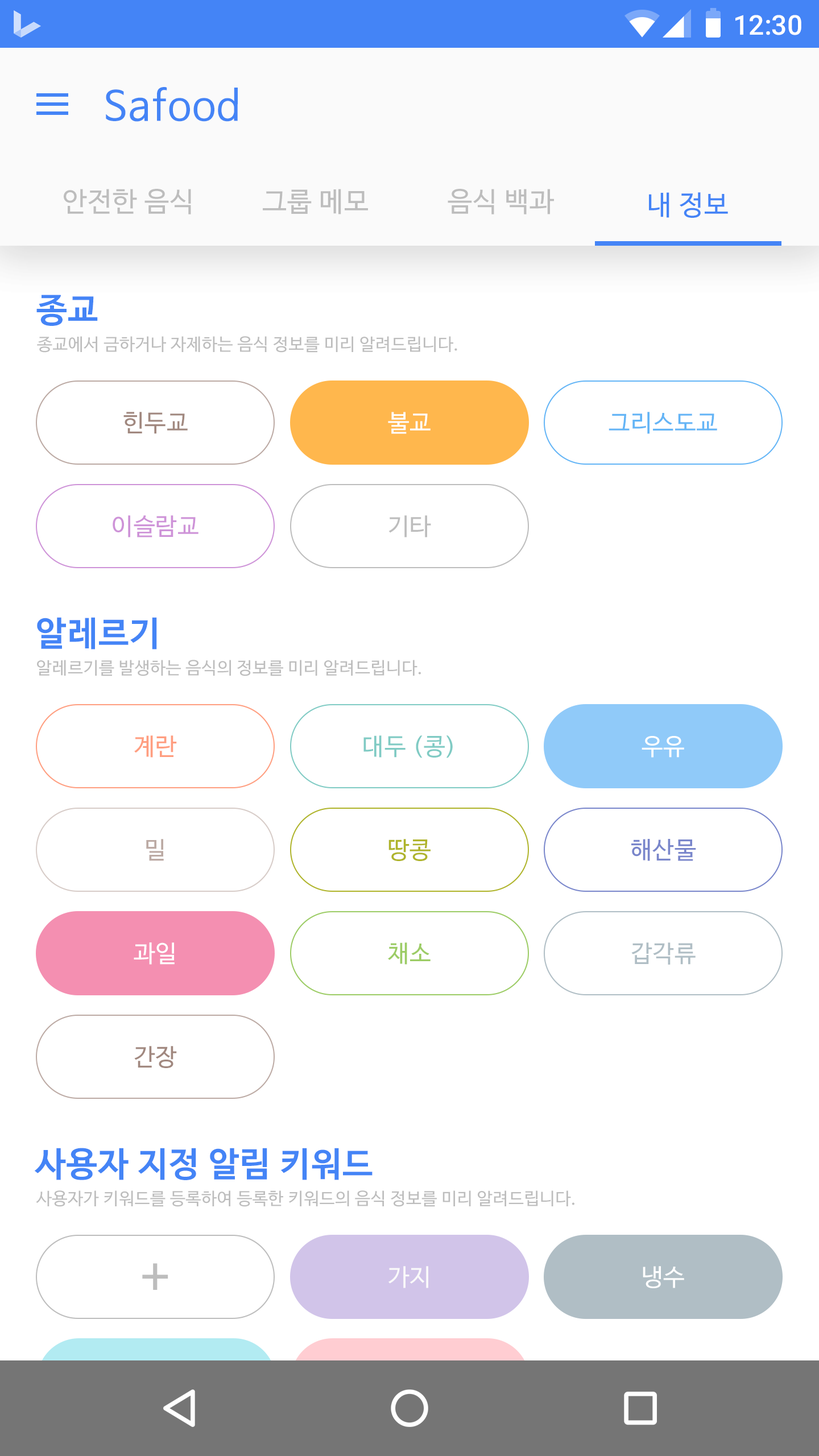
<style>
.page{position:relative;width:819px;height:1456px;background:#ffffff}
.page>*{position:absolute;margin:0}
.t1{font:27.3px "Roboto-Medium";color:#ffffff}
.t2{font:40.9px "NanumBarunGothic";letter-spacing:0.025em;color:#4484f6}
.t3{font:27.3px "NanumBarunGothic";letter-spacing:0.025em;color:#bdbdbd}
.t4{font:27.3px "NanumBarunGothic";letter-spacing:0.025em;color:#4484f6}
.t5{font:34.1px "NanumBarunGothicBold";letter-spacing:0.025em;color:#4484f6}
.t6{font:17.1px "NanumBarunGothic";letter-spacing:0.025em;color:#bdbdbd}
.t7{font:23.9px "NanumBarunGothic";letter-spacing:0.025em;color:#a1887f}
.t8{font:23.9px "NanumBarunGothic";letter-spacing:0.025em;color:#ffffff}
.t9{font:23.9px "NanumBarunGothic";letter-spacing:0.025em;color:#64b5f6}
.t10{font:23.9px "NanumBarunGothic";letter-spacing:0.025em;color:#ce93d8}
.t11{font:23.9px "NanumBarunGothic";letter-spacing:0.025em;color:#bdbdbd}
.t12{font:23.9px "NanumBarunGothic";letter-spacing:0.025em;color:#ff9e80}
.t13{font:23.9px "NanumBarunGothic";letter-spacing:0.025em;color:#80cbc4}
.t14{font:23.9px "NanumBarunGothic";letter-spacing:0.025em;color:#bcaaa4}
.t15{font:23.9px "NanumBarunGothic";letter-spacing:0.025em;color:#afb42b}
.t16{font:23.9px "NanumBarunGothic";letter-spacing:0.025em;color:#7986cb}
.t17{font:23.9px "NanumBarunGothic";letter-spacing:0.025em;color:#9ccc65}
.t18{font:23.9px "NanumBarunGothic";letter-spacing:0.025em;color:#b0bec5}
.t19{font:23.9px "NanumBarunGothic";letter-spacing:0.025em;color:#fafafa}
</style>
<div class="page">
<p class="t1" style="left:735px;top:15px;width:66px;height:20px">12:30</p>
<p class="t2" style="left:106px;top:87px;width:132px;height:35px">Safood</p>
<p class="t3" style="left:64px;top:189px;width:127px;height:25px">안전한 음식</p>
<p class="t3" style="left:263px;top:189px;width:105px;height:25px">그룹 메모</p>
<p class="t3" style="left:448px;top:189px;width:106px;height:25px">음식 백과</p>
<p class="t4" style="left:649px;top:192px;width:79px;height:26px">내 정보</p>
<p class="t5" style="left:36px;top:295px;width:62px;height:31px">종교</p>
<p class="t6" style="left:37px;top:336px;width:420px;height:17px">종교에서 금하거나 자제하는 음식 정보를 미리 알려드립니다.</p>
<p class="t7" style="left:123px;top:412px;width:65px;height:22px">힌두교</p>
<p class="t8" style="left:388px;top:412px;width:43px;height:22px">불교</p>
<p class="t9" style="left:609px;top:412px;width:108px;height:22px">그리스도교</p>
<p class="t10" style="left:113px;top:515px;width:85px;height:22px">이슬람교</p>
<p class="t11" style="left:388px;top:515px;width:43px;height:22px">기타</p>
<p class="t5" style="left:37px;top:617px;width:120px;height:33px">알레르기</p>
<p class="t6" style="left:37px;top:660px;width:384px;height:16px">알레르기를 발생하는 음식의 정보를 미리 알려드립니다.</p>
<p class="t12" style="left:134px;top:735px;width:43px;height:23px">계란</p>
<p class="t13" style="left:363px;top:735px;width:90px;height:23px">대두 (콩)</p>
<p class="t8" style="left:642px;top:736px;width:42px;height:22px">우유</p>
<p class="t14" style="left:146px;top:839px;width:18px;height:22px">밀</p>
<p class="t15" style="left:388px;top:839px;width:43px;height:22px">땅콩</p>
<p class="t16" style="left:631px;top:839px;width:65px;height:22px">해산물</p>
<p class="t8" style="left:134px;top:942px;width:41px;height:23px">과일</p>
<p class="t17" style="left:388px;top:942px;width:43px;height:23px">채소</p>
<p class="t18" style="left:631px;top:942px;width:65px;height:23px">갑각류</p>
<p class="t7" style="left:134px;top:1046px;width:43px;height:22px">간장</p>
<p class="t5" style="left:35px;top:1148px;width:338px;height:32px">사용자 지정 알림 키워드</p>
<p class="t6" style="left:36px;top:1190px;width:538px;height:17px">사용자가 키워드를 등록하여 등록한 키워드의 음식 정보를 미리 알려드립니다.</p>
<p class="t19" style="left:388px;top:1266px;width:40px;height:22px">가지</p>
<p class="t8" style="left:643px;top:1266px;width:41px;height:22px">냉수</p>
</div>
